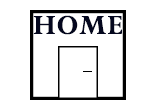
<style>
.page{position:relative;width:154px;height:100px;background:#ffffff}
.page>*{position:absolute;margin:0}
.t1{font:30.1px "Perpetua-Bold";color:#04071e;text-transform:uppercase;font-weight:bold}
</style>
<div class="page">
<p class="t1" style="left:33px;top:15px;width:89px;height:20px">home</p>
</div>
